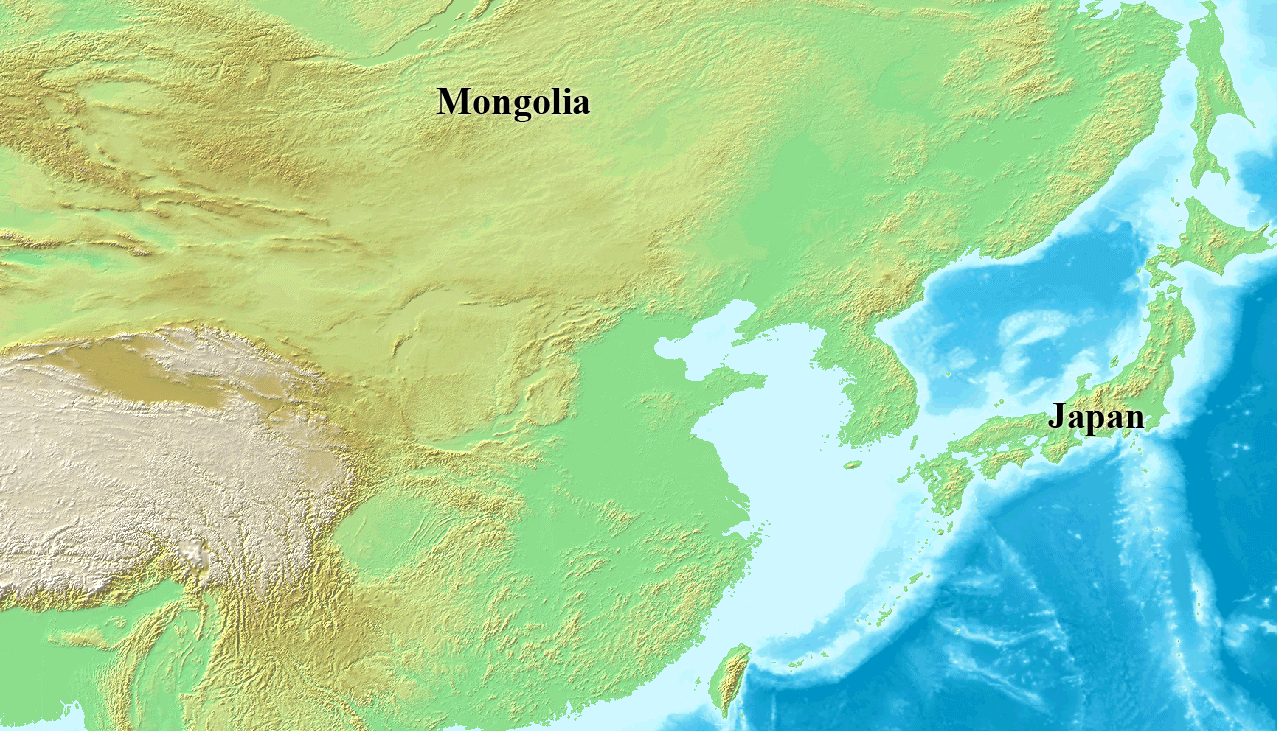
<style>
.page{position:relative;width:1277px;height:731px}
.page>*{position:absolute;margin:0}
.t1{font:38.4px "TimesNewRomanPS-BoldMT";color:#000000}
.t2{font:37.4px "TimesNewRomanPS-BoldMT";color:#000000}
</style>
<div class="page">
<p class="t1" style="left:436px;top:88px;width:155px;height:34px">Mongolia</p>
<p class="t2" style="left:1048px;top:403px;width:97px;height:33px">Japan</p>
</div>
